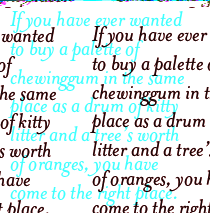
<style>
.page{position:relative;width:210px;height:213px;background:#ffffff}
.page>*{position:absolute;margin:0}
.t1{font:24px "MrsEavesItalic"}
</style>
<div class="page">
<p class="t1" style="left:8px;top:10px;width:176px;height:195px">If you have ever wanted <br>to buy a palette of <br>chewinggum in the same <br>place as a drum of kitty <br>litter and a tree’s worth <br>of oranges, you have <br>come to the right place.</p>
</div>
